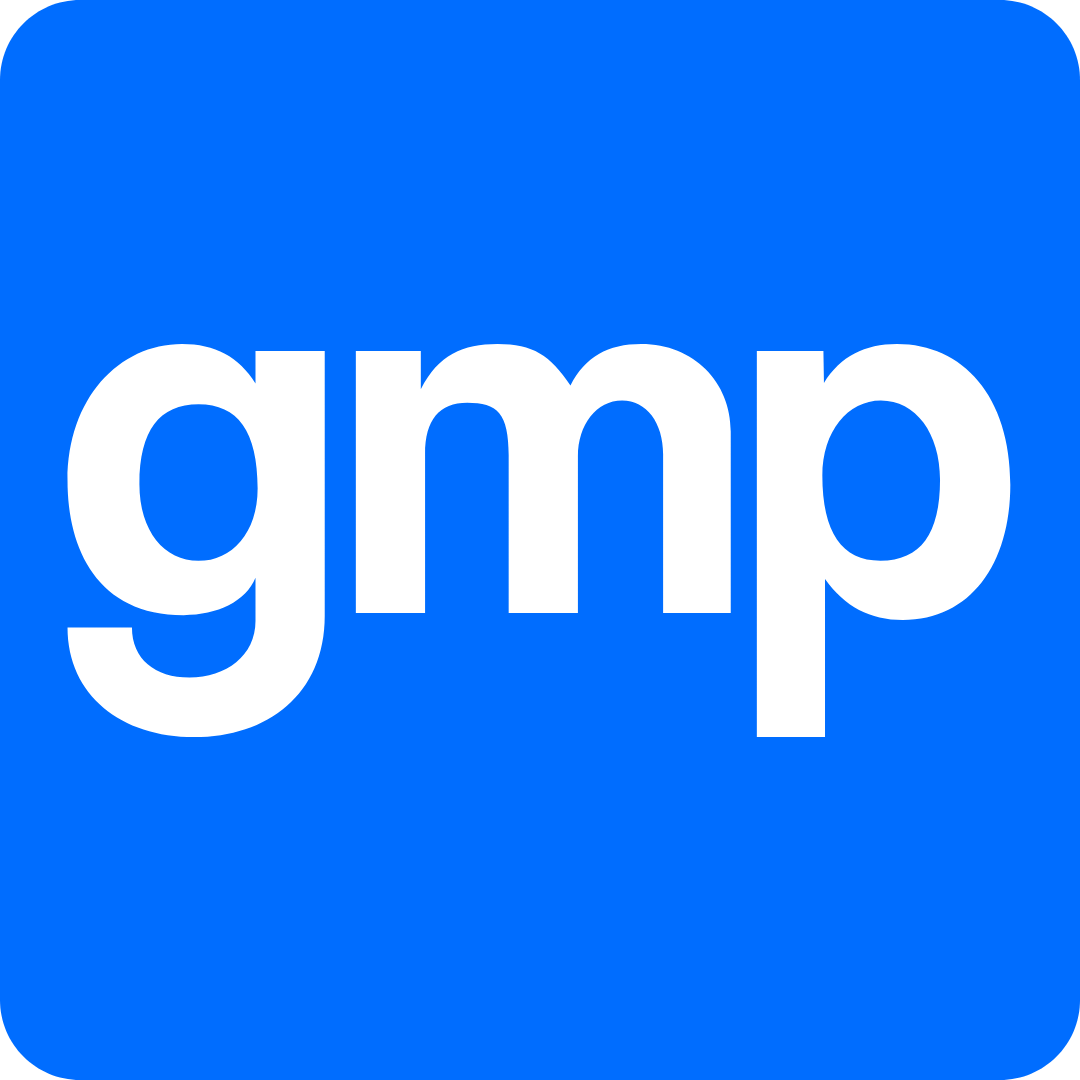
<style>
.page{position:relative;width:1080px;height:1080px;background:#006dff}
.page>*{position:absolute;margin:0}
.t1{font:532.5px "Coolvetica-Regular";color:#ffffff}
</style>
<div class="page">
<p class="t1" style="left:67px;top:344px;width:944px;height:393px">gmp</p>
</div>
